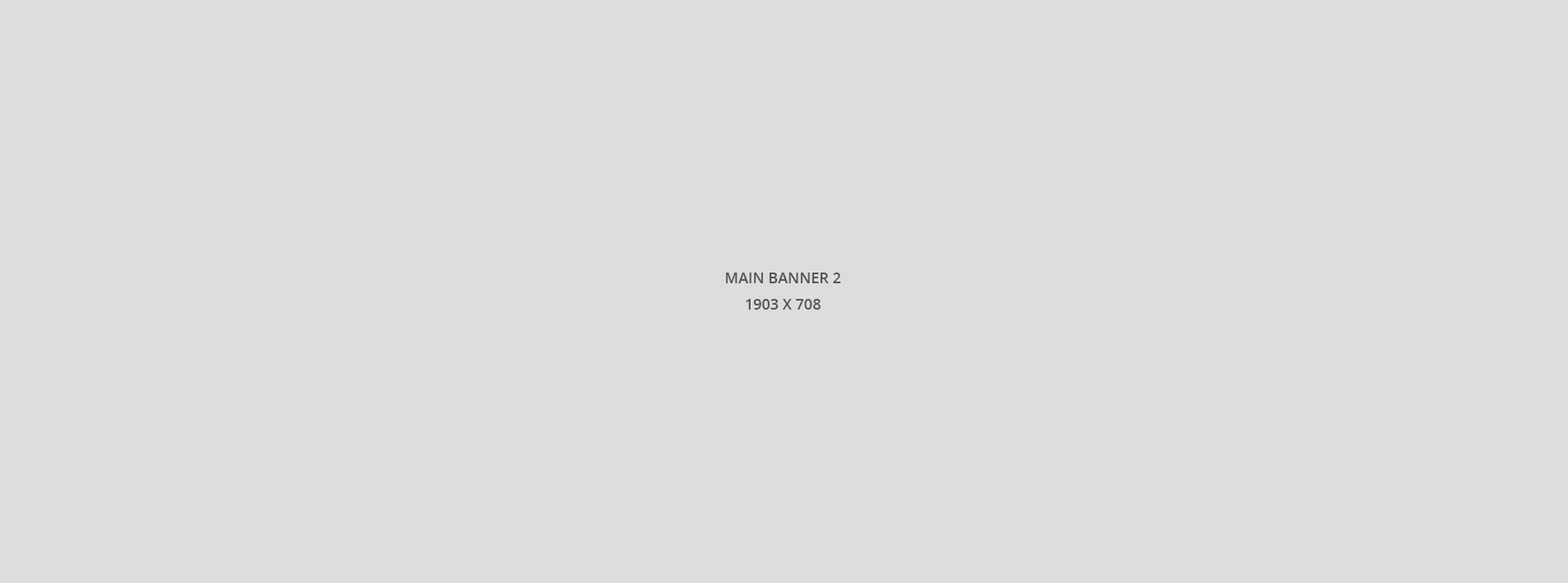
<style>
.page{position:relative;width:1568px;height:583px;background:#dddddd}
.page>*{position:absolute;margin:0}
.t1{font:14.8px "OpenSans-Semibold";color:#555555;text-transform:uppercase}
</style>
<div class="page">
<p class="t1" style="left:726px;top:273px;width:115px;height:37px;text-align:center">main banner 2<br>1903 x 708</p>
</div>
